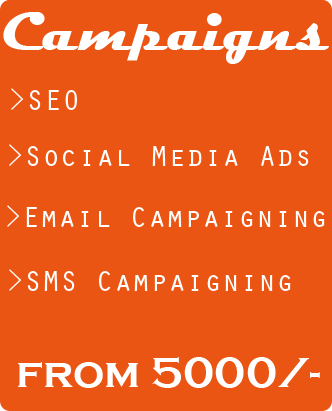
<style>
.page{position:relative;width:332px;height:411px;background:#eb5513}
.page>*{position:absolute;margin:0}
.t1{font:56px "Magneto-Bold";color:#ffffff}
.t2{font:30px "OratorStd";color:#ffffff}
.t3{font:44px "CopperplateGothic-Bold";color:#ffffff}
</style>
<div class="page">
<p class="t1" style="left:3px;top:12px;width:326px;height:52px">Campaigns</p>
<p class="t2" style="left:11px;top:88px;width:66px;height:22px">&gt;SEO</p>
<p class="t2" style="left:9px;top:144px;width:300px;height:22px">&gt;Social Media Ads</p>
<p class="t2" style="left:7px;top:205px;width:318px;height:22px">&gt;Email Campaigning</p>
<p class="t2" style="left:9px;top:269px;width:282px;height:22px">&gt;SMS Campaigning</p>
<p class="t3" style="left:18px;top:357px;width:302px;height:31px">from 5000/-</p>
</div>
